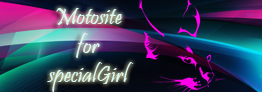
<style>
.page{position:relative;width:262px;height:92px}
.page>*{position:absolute;margin:0}
.t1{font:24px "Pristina-Regular";color:#d9f8f5}
</style>
<div class="page">
<p class="t1" style="left:47px;top:8px;width:87px;height:84px;text-align:center">Motosite<br>for<br>specialGirl</p>
</div>
